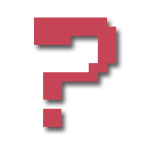
<style>
.page{position:relative;width:142px;height:154px;background:#ffffff}
.page>*{position:absolute;margin:0}
.t1{font:146.3px "Bandit";color:#c64456}
</style>
<div class="page">
<p class="t1" style="left:34px;top:17px;width:83px;height:110px">?</p>
</div>
